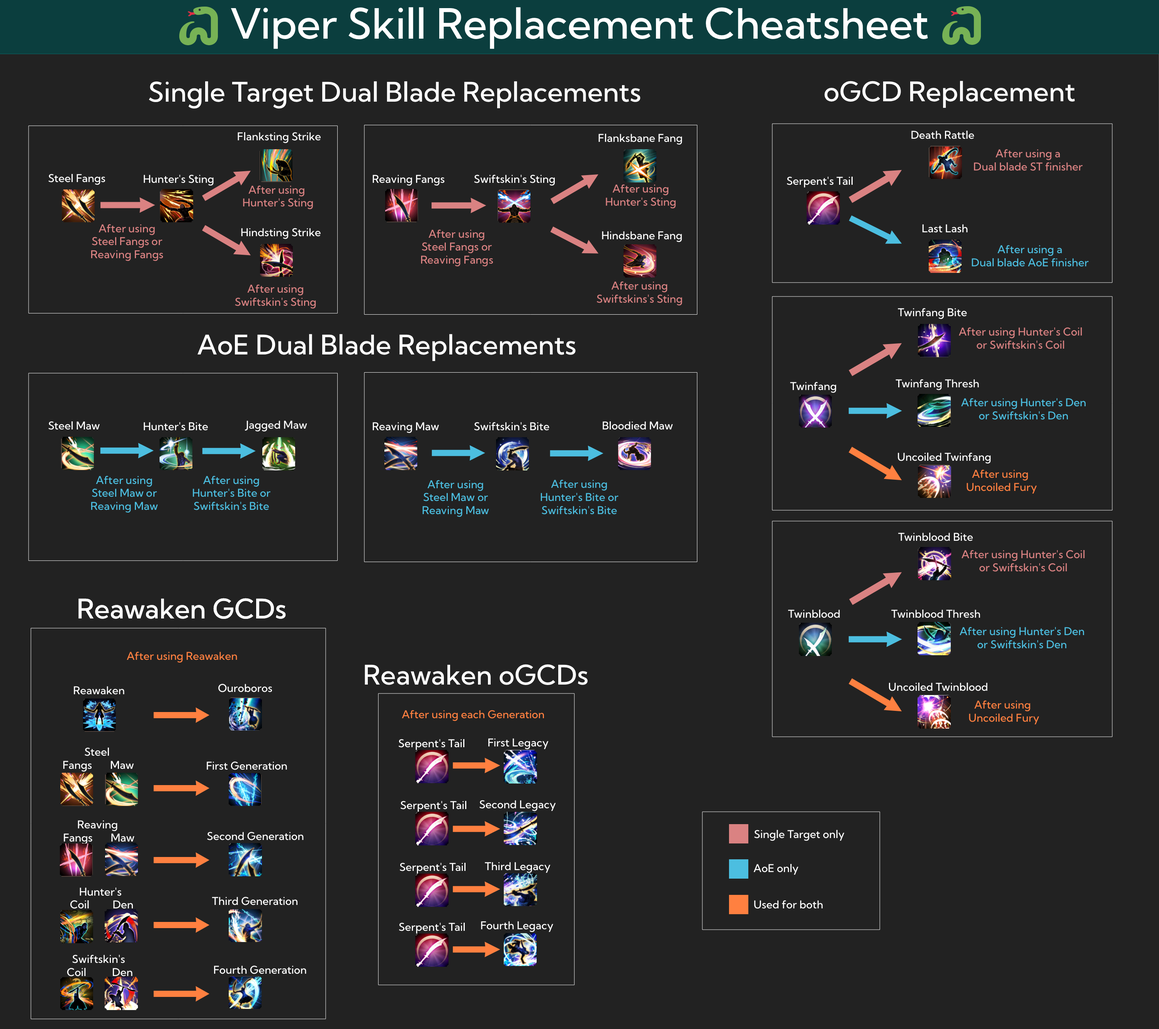
<style>
.page{position:relative;width:1159px;height:1029px;background:#222222}
.page>*{position:absolute;margin:0}
.t1{font:41.7px "KumbhSans-Medium";color:#ffffff}
.t2{font:27px "KumbhSans-Medium";color:#ffffff}
.t3{font:10.8px "KumbhSans-Medium";color:#ffffff}
.t4{font:10.8px "KumbhSans-Medium";color:#da8282}
.t5{font:10.8px "KumbhSans-Medium";color:#4cbee0}
.t6{font:10.8px "KumbhSans-Medium";color:#ff8040}
</style>
<div class="page">
<p class="t1" style="left:231px;top:7px;width:697px;height:42px">Viper Skill Replacement Cheatsheet</p>
<p class="t2" style="left:149px;top:81px;width:492px;height:28px">Single Target Dual Blade Replacements</p>
<p class="t2" style="left:825px;top:81px;width:250px;height:27px">oGCD Replacement</p>
<p class="t3" style="left:238px;top:132px;width:83px;height:11px">Flanksting Strike</p>
<p class="t3" style="left:599px;top:133px;width:83px;height:12px">Flanksbane Fang</p>
<p class="t3" style="left:912px;top:131px;width:63px;height:8px">Death Rattle</p>
<p class="t4" style="left:974px;top:149px;width:109px;height:22px;text-align:center">After using a<br>Dual blade ST finisher</p>
<p class="t3" style="left:48px;top:174px;width:57px;height:11px">Steel Fangs</p>
<p class="t3" style="left:144px;top:175px;width:70px;height:11px">Hunter's Sting</p>
<p class="t4" style="left:243px;top:185px;width:70px;height:24px;text-align:center">After using <br>Hunter's Sting</p>
<p class="t3" style="left:373px;top:175px;width:72px;height:11px">Reaving Fangs</p>
<p class="t3" style="left:474px;top:175px;width:81px;height:11px">Swiftskin's Sting</p>
<p class="t4" style="left:606px;top:184px;width:70px;height:25px;text-align:center">After using<br>Hunter's Sting</p>
<p class="t3" style="left:787px;top:177px;width:66px;height:10px">Serpent's Tail</p>
<p class="t4" style="left:91px;top:224px;width:72px;height:37px;text-align:center">After using<br>Steel Fangs or<br>Reaving Fangs</p>
<p class="t3" style="left:241px;top:228px;width:80px;height:11px">Hindsting Strike</p>
<p class="t4" style="left:421px;top:230px;width:72px;height:37px;text-align:center">After using<br>Steel Fangs or<br>Reaving Fangs</p>
<p class="t3" style="left:602px;top:231px;width:80px;height:11px">Hindsbane Fang</p>
<p class="t3" style="left:922px;top:224px;width:46px;height:9px">Last Lash</p>
<p class="t5" style="left:972px;top:245px;width:117px;height:22px;text-align:center">After using a<br>Dual blade AoE finisher</p>
<p class="t4" style="left:597px;top:281px;width:85px;height:25px;text-align:center">After using<br>Swiftskins's Sting</p>
<p class="t4" style="left:235px;top:284px;width:81px;height:25px;text-align:center">After using<br>Swiftskin's Sting</p>
<p class="t3" style="left:898px;top:308px;width:69px;height:11px">Twinfang Bite</p>
<p class="t4" style="left:959px;top:327px;width:123px;height:22px;text-align:center">After using Hunter's Coil<br>or Swiftskin's Coil</p>
<p class="t2" style="left:197px;top:334px;width:379px;height:27px">AoE Dual Blade Replacements</p>
<p class="t3" style="left:790px;top:382px;width:47px;height:11px">Twinfang</p>
<p class="t3" style="left:896px;top:379px;width:83px;height:11px">Twinfang Thresh</p>
<p class="t5" style="left:961px;top:398px;width:125px;height:22px;text-align:center">After using Hunter's Den<br>or Swiftskin's Den</p>
<p class="t3" style="left:48px;top:421px;width:52px;height:9px">Steel Maw</p>
<p class="t3" style="left:144px;top:422px;width:64px;height:8px">Hunter's Bite</p>
<p class="t3" style="left:245px;top:420px;width:62px;height:12px">Jagged Maw</p>
<p class="t3" style="left:373px;top:422px;width:66px;height:11px">Reaving Maw</p>
<p class="t3" style="left:474px;top:422px;width:75px;height:8px">Swiftskin's Bite</p>
<p class="t3" style="left:603px;top:421px;width:70px;height:9px">Bloodied Maw</p>
<p class="t3" style="left:898px;top:452px;width:93px;height:12px">Uncoiled Twinfang</p>
<p class="t6" style="left:967px;top:469px;width:70px;height:24px;text-align:center">After using <br>Uncoiled Fury</p>
<p class="t5" style="left:91px;top:476px;width:67px;height:37px;text-align:center">After using<br>Steel Maw or<br>Reaving Maw</p>
<p class="t5" style="left:193px;top:476px;width:78px;height:34px;text-align:center">After using<br>Hunter's Bite or<br>Swiftskin's Bite</p>
<p class="t5" style="left:422px;top:480px;width:67px;height:37px;text-align:center">After using<br>Steel Maw or<br>Reaving Maw</p>
<p class="t5" style="left:541px;top:480px;width:78px;height:34px;text-align:center">After using<br>Hunter's Bite or<br>Swiftskin's Bite</p>
<p class="t3" style="left:898px;top:532px;width:75px;height:9px">Twinblood Bite</p>
<p class="t4" style="left:961px;top:549px;width:124px;height:23px;text-align:center">After using Hunter's Coil<br>or Swiftskin's Coil</p>
<p class="t2" style="left:78px;top:598px;width:208px;height:21px">Reawaken GCDs</p>
<p class="t2" style="left:78px;top:598px;width:208px;height:21px">Reawaken GCDs</p>
<p class="t3" style="left:788px;top:609px;width:52px;height:9px">Twinblood</p>
<p class="t3" style="left:891px;top:609px;width:89px;height:9px">Twinblood Thresh</p>
<p class="t5" style="left:959px;top:627px;width:125px;height:21px;text-align:center">After using Hunter's Den<br>or Swiftskin's Den</p>
<p class="t6" style="left:127px;top:651px;width:110px;height:12px">After using Reawaken</p>
<p class="t2" style="left:365px;top:664px;width:223px;height:21px">Reawaken oGCDs</p>
<p class="t3" style="left:74px;top:686px;width:50px;height:8px">Reawaken</p>
<p class="t3" style="left:218px;top:684px;width:54px;height:8px">Ouroboros</p>
<p class="t3" style="left:889px;top:682px;width:99px;height:9px">Uncoiled Twinblood</p>
<p class="t6" style="left:969px;top:700px;width:70px;height:24px;text-align:center">After using <br>Uncoiled Fury</p>
<p class="t6" style="left:402px;top:710px;width:142px;height:11px">After using each Generation</p>
<p class="t3" style="left:63px;top:747px;width:71px;height:25px;text-align:center">Steel <br>Fangs       Maw</p>
<p class="t3" style="left:398px;top:739px;width:66px;height:11px">Serpent's Tail</p>
<p class="t3" style="left:488px;top:738px;width:61px;height:11px">First Legacy</p>
<p class="t3" style="left:207px;top:761px;width:80px;height:9px">First Generation</p>
<p class="t3" style="left:400px;top:801px;width:66px;height:10px">Serpent's Tail</p>
<p class="t3" style="left:480px;top:800px;width:76px;height:11px">Second Legacy</p>
<p class="t3" style="left:64px;top:820px;width:70px;height:24px;text-align:center">Reaving <br>Fangs       Maw</p>
<p class="t3" style="left:207px;top:832px;width:97px;height:8px">Second Generation</p>
<p class="t3" style="left:754px;top:830px;width:91px;height:11px">Single Target only</p>
<p class="t3" style="left:400px;top:862px;width:66px;height:11px">Serpent's Tail</p>
<p class="t3" style="left:485px;top:862px;width:66px;height:11px">Third Legacy</p>
<p class="t3" style="left:754px;top:864px;width:45px;height:10px">AoE only</p>
<p class="t3" style="left:70px;top:887px;width:63px;height:21px;text-align:center">Hunter's <br>Coil         Den</p>
<p class="t3" style="left:212px;top:896px;width:86px;height:9px">Third Generation</p>
<p class="t3" style="left:754px;top:900px;width:69px;height:8px">Used for both</p>
<p class="t3" style="left:399px;top:922px;width:66px;height:11px">Serpent's Tail</p>
<p class="t3" style="left:481px;top:921px;width:72px;height:11px">Fourth Legacy</p>
<p class="t3" style="left:67px;top:954px;width:66px;height:22px;text-align:center">Swiftskin's <br>Coil          Den</p>
<p class="t3" style="left:214px;top:965px;width:92px;height:9px">Fourth Generation</p>
</div>
